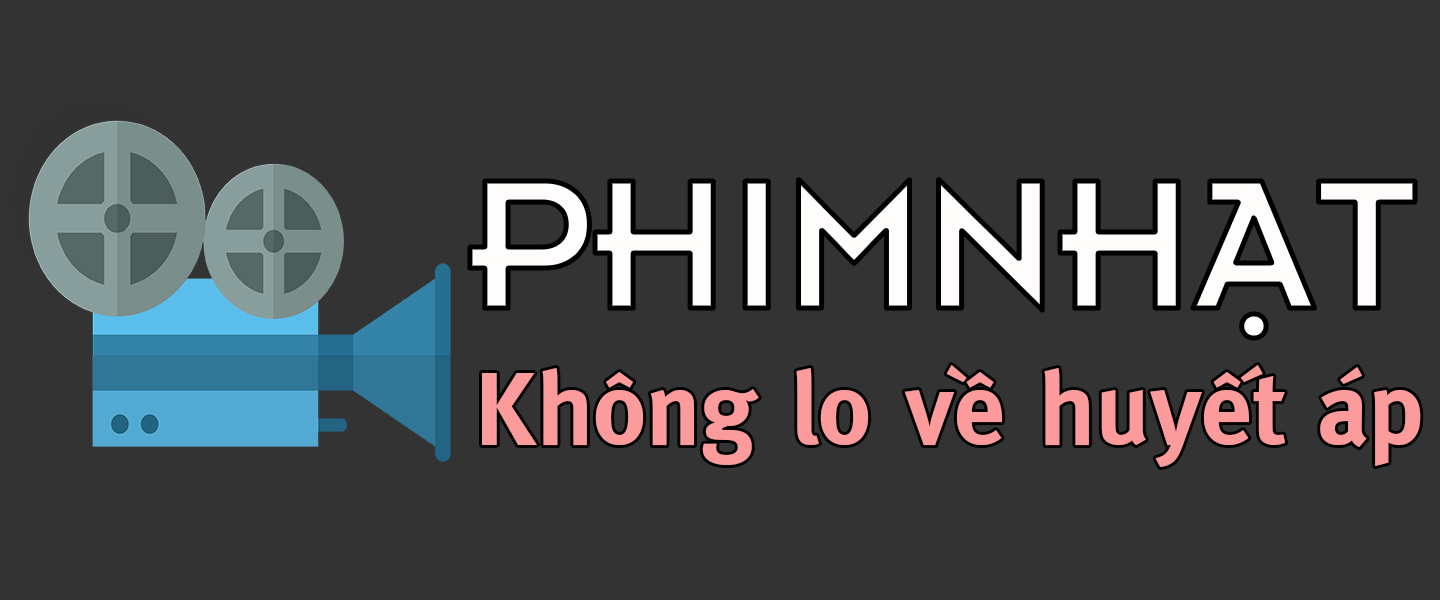
<style>
.page{position:relative;width:1440px;height:600px;background:#333333}
.page>*{position:absolute;margin:0}
.t1{font:199px "SFUInsignia";color:#fffcfc}
.t2{font:102px "SFUMetaBold";color:#fb9b9b}
</style>
<div class="page">
<p class="t1" style="left:469px;top:179px;width:946px;height:159px">PHIMNHẠT</p>
<p class="t2" style="left:482px;top:365px;width:939px;height:102px">Không lo về huyết áp</p>
</div>
